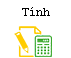
<style>
.page{position:relative;width:71px;height:58px;background:#ffffff}
.page>*{position:absolute;margin:0}
.t1{font:12px "CourierNewPSMT";color:#000000}
</style>
<div class="page">
<p class="t1" style="left:22px;top:7px;width:28px;height:9px">Tính</p>
</div>
